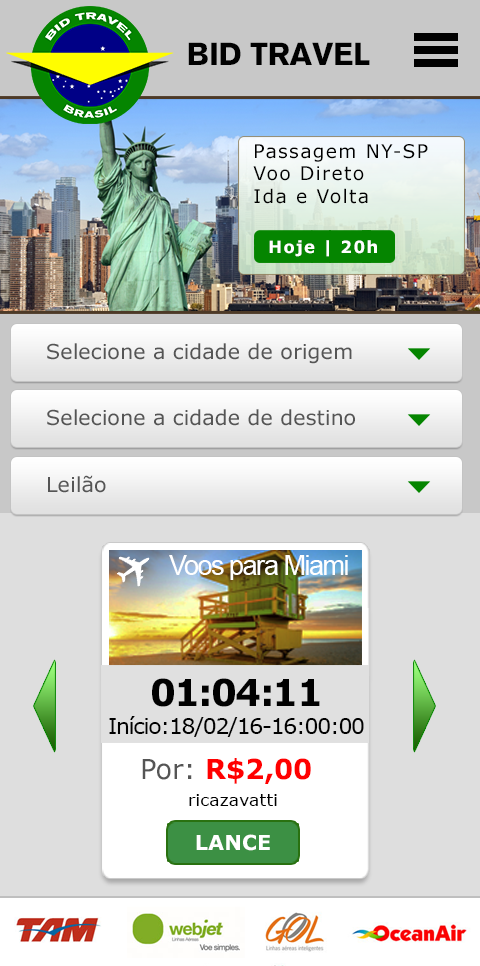
<style>
.page{position:relative;width:480px;height:966px}
.page>*{position:absolute;margin:0}
.t1{font:31.2px "AkzidenzGrotesk-Black";letter-spacing:-0.01em;color:#010101}
.t2{font:18.8px "Verdana";letter-spacing:0.075em;color:#000000}
.t3{font:16.7px "Verdana-Bold";letter-spacing:0.075em;color:#ffffff}
.t4{font:20.8px "Verdana";color:#555555}
.t5{font:27.1px "ArialMT";letter-spacing:-0.05em;color:#ffffff}
.t6{font:21.9px/27.9px "Verdana";letter-spacing:-0.05em;color:#010101}
.t7{font:37.2px/27.9px "Verdana-Bold";letter-spacing:-0.05em;color:#010101}
.t8{font:27.4px "Verdana-Bold";color:#ff0000}
.t9{font:27.4px "Verdana";color:#555555}
.t10{font:17.4px "Verdana";color:#000000}
.t11{font:20.8px "Verdana-Bold";color:#ffffff}
</style>
<div class="page">
<p class="t1" style="left:188px;top:42px;width:182px;height:23px">BID TRAVEL</p>
<p class="t2" style="left:253px;top:144px;width:175px;height:60px">Passagem NY-SP<br>Voo Direto <br>Ida e Volta</p>
<p class="t3" style="left:269px;top:240px;width:108px;height:17px">Hoje | 20h</p>
<p class="t4" style="left:47px;top:343px;width:305px;height:21px">Selecione a cidade de origem</p>
<p class="t4" style="left:47px;top:409px;width:308px;height:17px">Selecione a cidade de destino</p>
<p class="t4" style="left:48px;top:475px;width:58px;height:18px">Leilão</p>
<p class="t5" style="left:169px;top:555px;width:179px;height:25px">Voos para Miami</p>
<p class="t6" style="left:109px;top:678px;width:255px;height:59px;text-align:center"><span class="t7">01:04:11<br></span>Início:18/02/16-16:00:00</p>
<p class="t8" style="left:142px;top:758px;width:169px;height:26px"><span class="t9">Por: </span>R$2,00</p>
<p class="t10" style="left:189px;top:794px;width:88px;height:12px">ricazavatti</p>
<p class="t11" style="left:196px;top:834px;width:74px;height:17px">LANCE</p>
</div>
